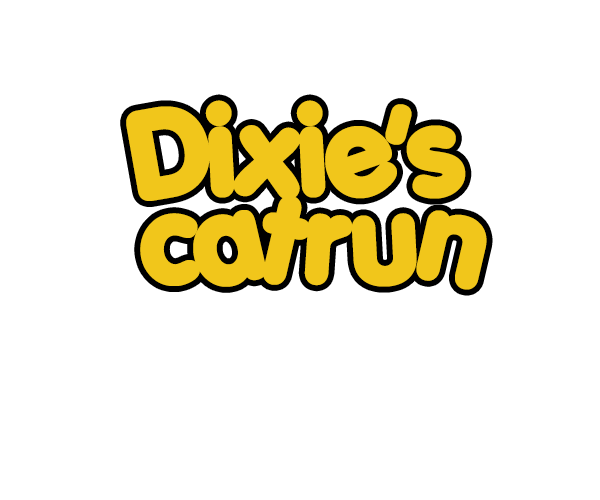
<style>
.page{position:relative;width:600px;height:500px;background:#ffffff}
.page>*{position:absolute;margin:0}
.t1{font:120px/72px "Porkys";color:#f1c61b}
</style>
<div class="page">
<p class="t1" style="left:126px;top:100px;width:361px;height:190px;text-align:center">Dixie's <br>catrun</p>
</div>
